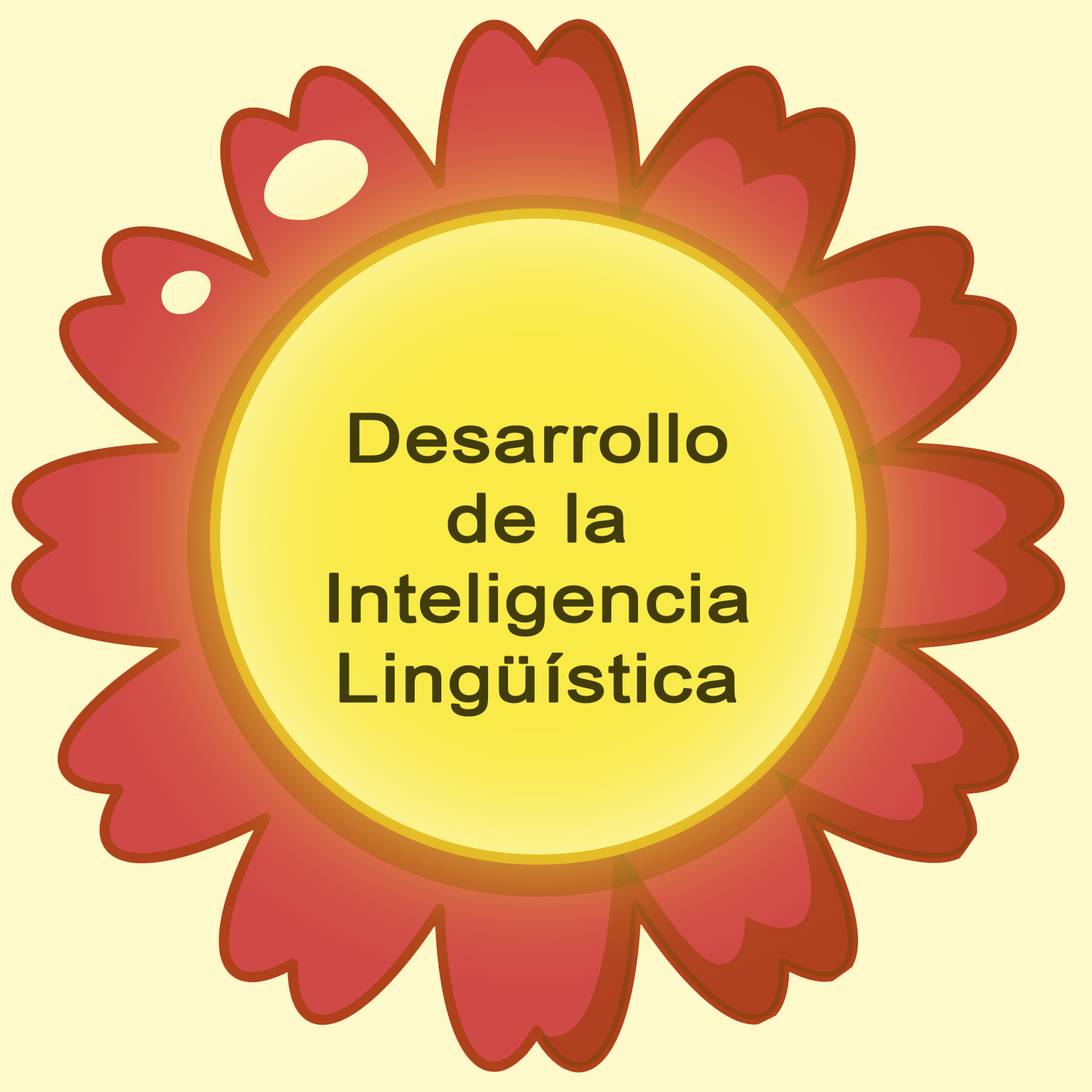
<style>
.page{position:relative;width:1092px;height:1092px;background:#fdf9cb}
.page>*{position:absolute;margin:0}
.t1{font:66.6px "ArialMT";color:#413c09;font-weight:bold;scale:1.2 1}
.t2{font:38.9px "ArialMT";color:#413c09;font-weight:bold;scale:1.2 1}
</style>
<div class="page">
<p class="t1" style="left:329px;top:413px;width:419px;height:304px;text-align:center"><span class="t2"><br><br><br><br></span>Desarrollo <br>de la <br>Inteligencia <br>Lingüística</p>
</div>
